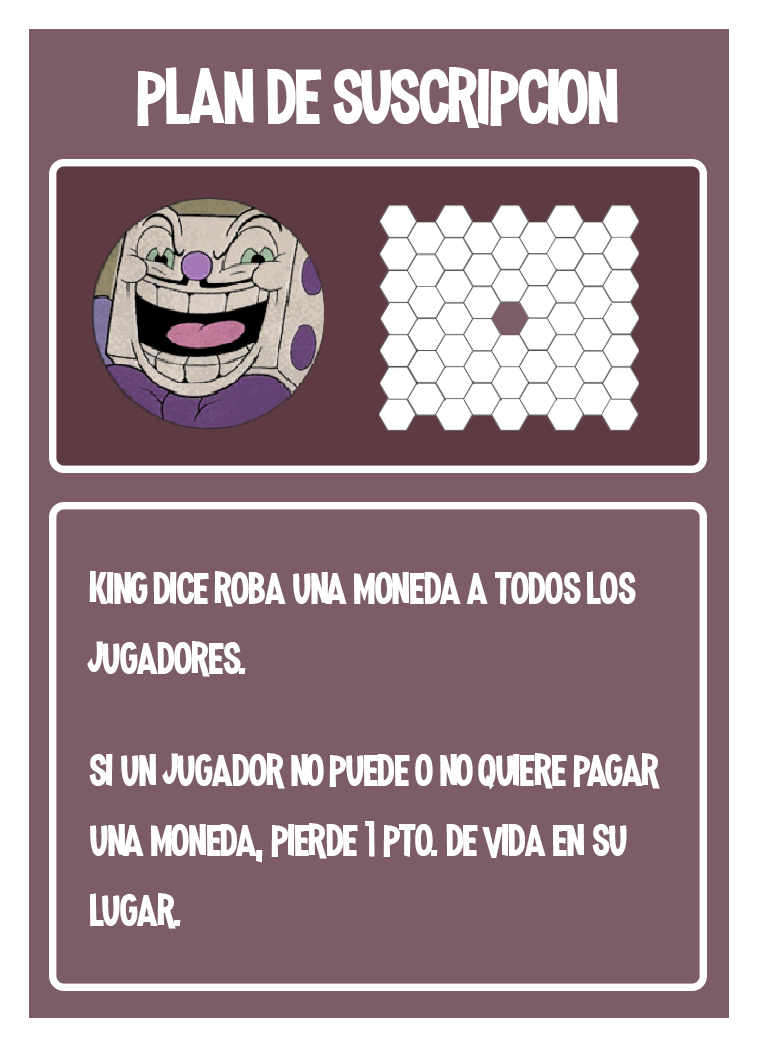
<style>
.page{position:relative;width:758px;height:1047px;background:#7d5d65}
.page>*{position:absolute;margin:0}
.t1{font:100px "MadnessHyperactive";color:#ffffff}
.t2{font:58.3px "MadnessHyperactive";color:#ffffff}
.t3{font:50px "MadnessHyperactive";color:#ffffff}
</style>
<div class="page">
<p class="t1" style="left:137px;top:67px;width:481px;height:61px">plan de suscripcion</p>
<p class="t2" style="left:87px;top:571px;width:549px;height:106px">king dice roba una moneda a todos los jugadores.</p>
<p class="t2" style="left:89px;top:753px;width:571px;height:176px">si un jugador no puede o no quiere pagar una moneda, pierde <span class="t3">1</span> pto. de vida en su lugar.</p>
</div>
